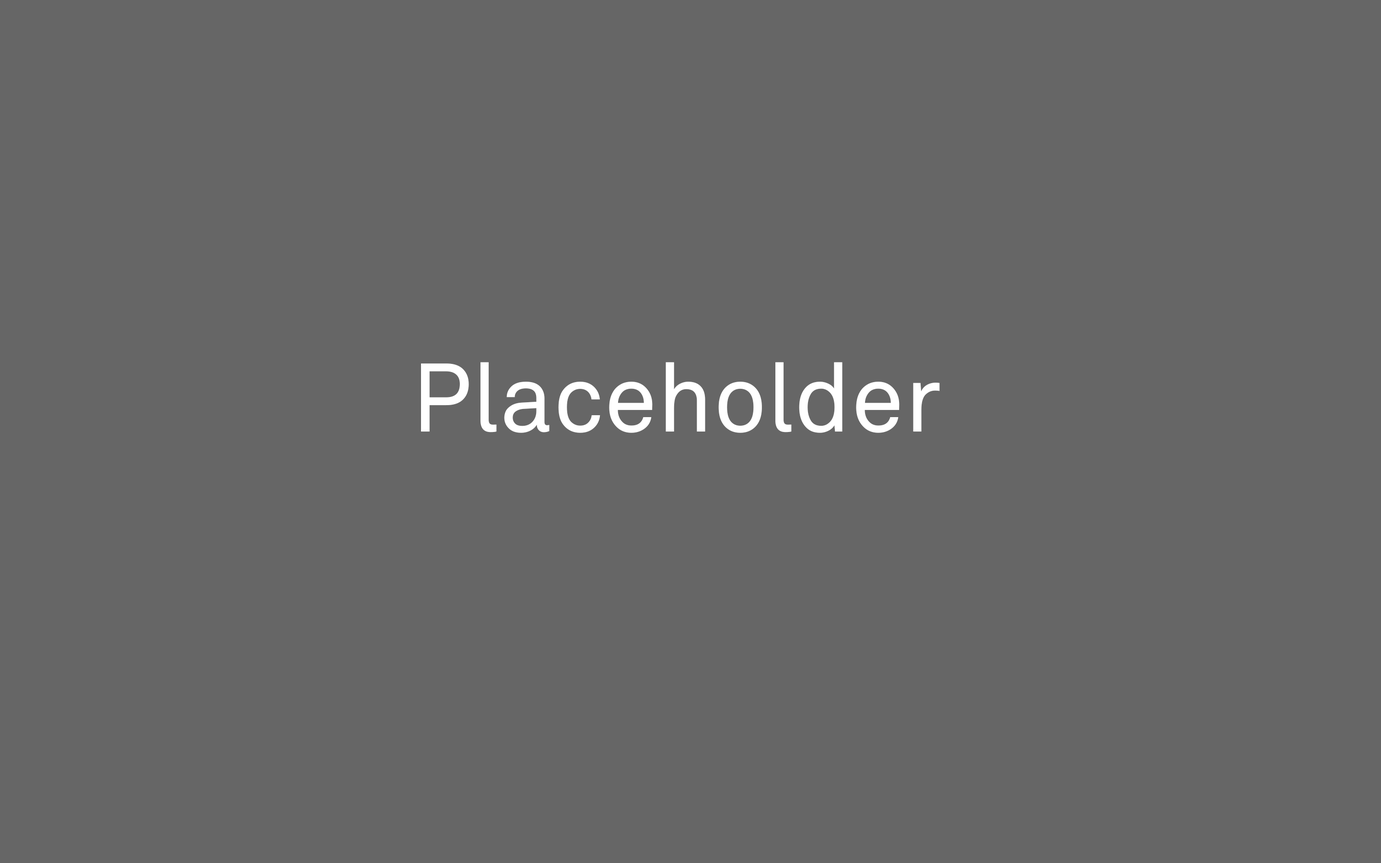
<style>
.page{position:relative;width:1381px;height:863px;background:#666666}
.page>*{position:absolute;margin:0}
.t1{font:95.9px "AkkuratPro-Regular";color:#ffffff}
</style>
<div class="page">
<p class="t1" style="left:421px;top:362px;width:519px;height:71px">Placeholder</p>
</div>
